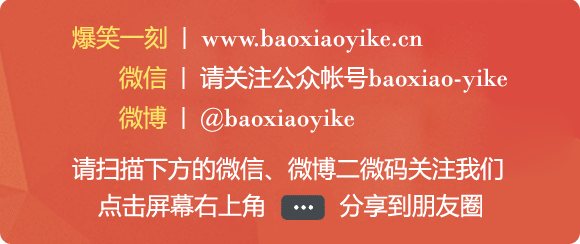
<style>
.page{position:relative;width:580px;height:244px}
.page>*{position:absolute;margin:0}
.t1{font:26px "BodoniMT";color:#ffffff}
.t2{font:24px "MicrosoftYaHei";color:#fae264}
.t3{font:22px "SimHei";color:#ffffff}
.t4{font:24px "MicrosoftYaHei";color:#ffffff}
</style>
<div class="page">
<p class="t1" style="left:72px;top:25px;width:351px;height:28px"><span class="t2">爆笑一刻</span><span class="t3"> | </span>www.baoxiaoyike.cn</p>
<p class="t1" style="left:119px;top:65px;width:388px;height:28px"><span class="t2">微信</span><span class="t3"> | </span><span class="t4">请关注公众帐号</span>baoxiao-yike</p>
<p class="t1" style="left:119px;top:106px;width:235px;height:27px"><span class="t2">微博</span><span class="t3"> | </span>@baoxiaoyike</p>
<p class="t4" style="left:72px;top:156px;width:431px;height:25px">请扫描下方的微信、微博二微码关注我们</p>
<p class="t4" style="left:98px;top:193px;width:384px;height:25px">点击屏幕右上角       　分享到朋友圈</p>
</div>
